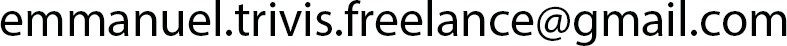
<style>
.page{position:relative;width:787px;height:46px;background:#ffffff}
.page>*{position:absolute;margin:0}
.t1{font:50px "MyriadPro-Regular";color:#000101}
</style>
<div class="page">
<p class="t1" style="left:0px;top:0px;width:787px;height:46px">emmanuel.trivis.freelance@gmail.com</p>
</div>
